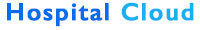
<style>
.page{position:relative;width:200px;height:30px;background:#ffffff}
.page>*{position:absolute;margin:0}
.t1{font:25px "GillSans-SemiBold";letter-spacing:0.05em;color:#056ded;font-weight:bold}
.t2{font:25px "GillSans-SemiBold";letter-spacing:0.05em;color:#18aff3;font-weight:bold}
</style>
<div class="page">
<p class="t1" style="left:7px;top:2px;width:187px;height:25px">Hospital <span class="t2">Cloud</span></p>
</div>
